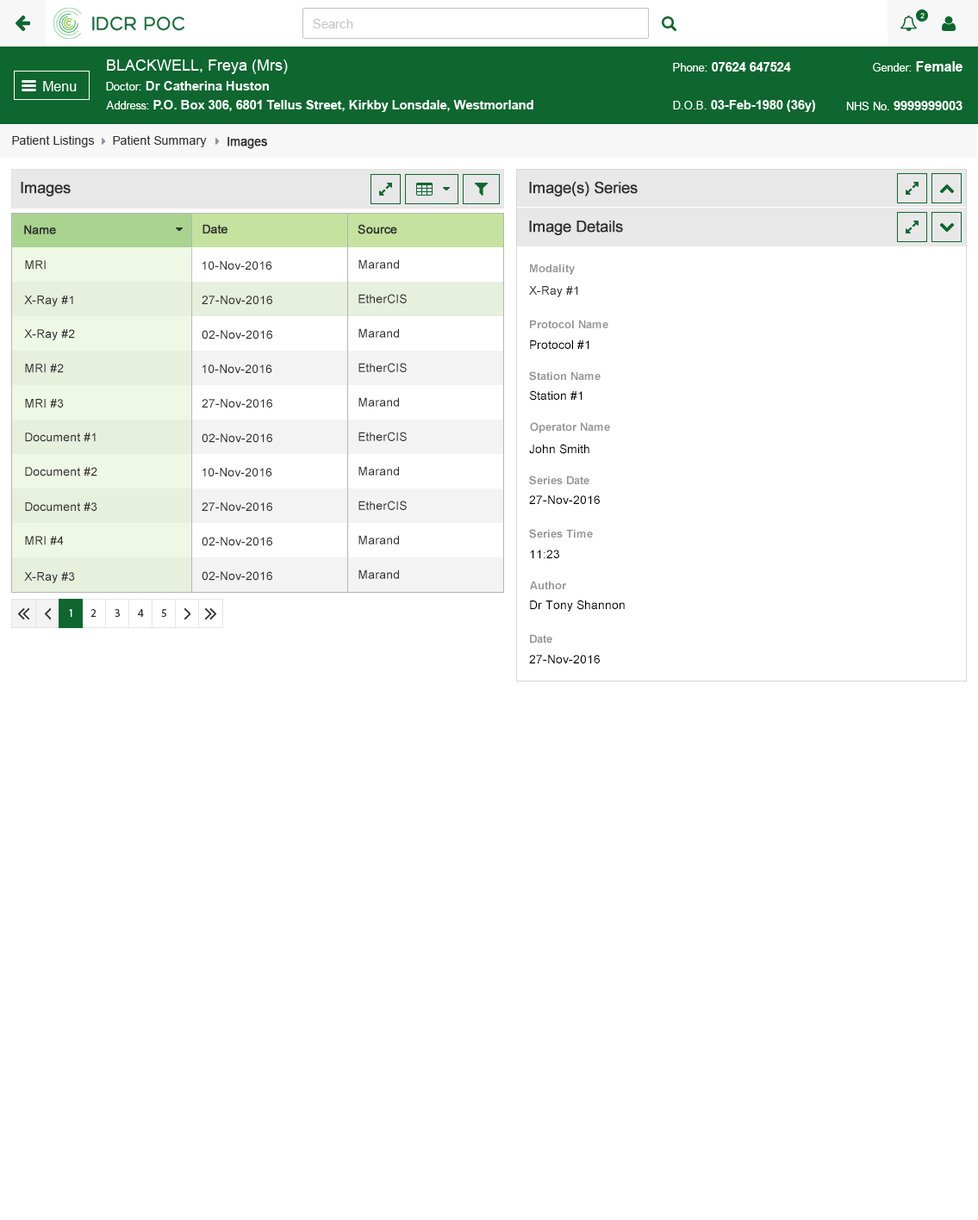
<style>
.page{position:relative;width:978px;height:1220px;background:#ffffff}
.page>*{position:absolute;margin:0}
.t1{font:12.1px "ArialMT";color:#313131}
.t2{font:12.1px "ArialMT";color:#313131;font-weight:bold}
.t3{font:15.5px "ArialMT";color:#303030;font-weight:bold}
.t4{font:12.1px "ArialMT";color:#303030;font-weight:bold}
.t5{font:12.1px "ArialMT";color:#303030}
.t6{font:11.2px "Arial-BoldMT";color:#959595}
.t7{font:12.1px "ArialMT";color:#000000}
</style>
<div class="page">
<p class="t1" style="left:12px;top:135px;width:83px;height:12px">Patient Listings</p>
<p class="t1" style="left:113px;top:135px;width:94px;height:12px">Patient Summary</p>
<p class="t2" style="left:227px;top:137px;width:40px;height:12px">Images</p>
<p class="t3" style="left:21px;top:182px;width:50px;height:14px">Images</p>
<p class="t3" style="left:529px;top:181px;width:108px;height:15px">Image(s) Series</p>
<p class="t3" style="left:529px;top:221px;width:94px;height:14px">Image Details</p>
<p class="t4" style="left:24px;top:225px;width:32px;height:9px">Name</p>
<p class="t4" style="left:202px;top:224px;width:25px;height:9px">Date</p>
<p class="t4" style="left:357px;top:224px;width:40px;height:10px">Source</p>
<p class="t5" style="left:25px;top:260px;width:21px;height:10px">MRI</p>
<p class="t5" style="left:202px;top:261px;width:70px;height:9px">10-Nov-2016</p>
<p class="t5" style="left:358px;top:259px;width:41px;height:10px">Marand</p>
<p class="t6" style="left:530px;top:264px;width:45px;height:11px">Modality</p>
<p class="t5" style="left:358px;top:294px;width:49px;height:9px">EtherCIS</p>
<p class="t5" style="left:529px;top:286px;width:49px;height:11px">X-Ray #1</p>
<p class="t5" style="left:24px;top:295px;width:49px;height:12px">X-Ray #1</p>
<p class="t5" style="left:202px;top:295px;width:70px;height:9px">27-Nov-2016</p>
<p class="t5" style="left:24px;top:329px;width:51px;height:11px">X-Ray #2</p>
<p class="t5" style="left:202px;top:330px;width:70px;height:9px">02-Nov-2016</p>
<p class="t5" style="left:358px;top:328px;width:41px;height:10px">Marand</p>
<p class="t6" style="left:530px;top:320px;width:78px;height:8px">Protocol Name</p>
<p class="t7" style="left:530px;top:340px;width:59px;height:9px">Protocol #1</p>
<p class="t5" style="left:25px;top:363px;width:39px;height:10px">MRI #2</p>
<p class="t5" style="left:202px;top:364px;width:70px;height:9px">10-Nov-2016</p>
<p class="t5" style="left:358px;top:363px;width:49px;height:9px">EtherCIS</p>
<p class="t6" style="left:529px;top:371px;width:71px;height:10px">Station Name</p>
<p class="t5" style="left:25px;top:399px;width:39px;height:8px">MRI #3</p>
<p class="t5" style="left:202px;top:399px;width:70px;height:8px">27-Nov-2016</p>
<p class="t5" style="left:358px;top:397px;width:41px;height:10px">Marand</p>
<p class="t7" style="left:529px;top:390px;width:53px;height:11px">Station #1</p>
<p class="t6" style="left:530px;top:422px;width:80px;height:11px">Operator Name</p>
<p class="t5" style="left:25px;top:432px;width:71px;height:10px">Document #1</p>
<p class="t5" style="left:202px;top:433px;width:70px;height:10px">02-Nov-2016</p>
<p class="t5" style="left:358px;top:432px;width:49px;height:9px">EtherCIS</p>
<p class="t7" style="left:529px;top:444px;width:60px;height:10px">John Smith</p>
<p class="t5" style="left:25px;top:467px;width:72px;height:9px">Document #2</p>
<p class="t5" style="left:202px;top:468px;width:70px;height:8px">10-Nov-2016</p>
<p class="t5" style="left:358px;top:466px;width:41px;height:9px">Marand</p>
<p class="t6" style="left:529px;top:475px;width:60px;height:10px">Series Date</p>
<p class="t7" style="left:529px;top:495px;width:71px;height:9px">27-Nov-2016</p>
<p class="t5" style="left:25px;top:502px;width:72px;height:9px">Document #3</p>
<p class="t5" style="left:202px;top:502px;width:70px;height:9px">27-Nov-2016</p>
<p class="t5" style="left:358px;top:500px;width:49px;height:10px">EtherCIS</p>
<p class="t6" style="left:529px;top:529px;width:64px;height:9px">Series Time</p>
<p class="t5" style="left:25px;top:536px;width:39px;height:9px">MRI #4</p>
<p class="t5" style="left:202px;top:537px;width:70px;height:9px">02-Nov-2016</p>
<p class="t5" style="left:358px;top:535px;width:41px;height:9px">Marand</p>
<p class="t7" style="left:530px;top:550px;width:29px;height:8px">11:23</p>
<p class="t5" style="left:358px;top:569px;width:41px;height:10px">Marand</p>
<p class="t5" style="left:24px;top:572px;width:51px;height:11px">X-Ray #3</p>
<p class="t5" style="left:202px;top:571px;width:70px;height:10px">02-Nov-2016</p>
<p class="t6" style="left:530px;top:581px;width:37px;height:8px">Author</p>
<p class="t7" style="left:530px;top:600px;width:94px;height:12px">Dr Tony Shannon</p>
<p class="t6" style="left:530px;top:634px;width:22px;height:9px">Date</p>
<p class="t7" style="left:529px;top:655px;width:71px;height:8px">27-Nov-2016</p>
</div>
